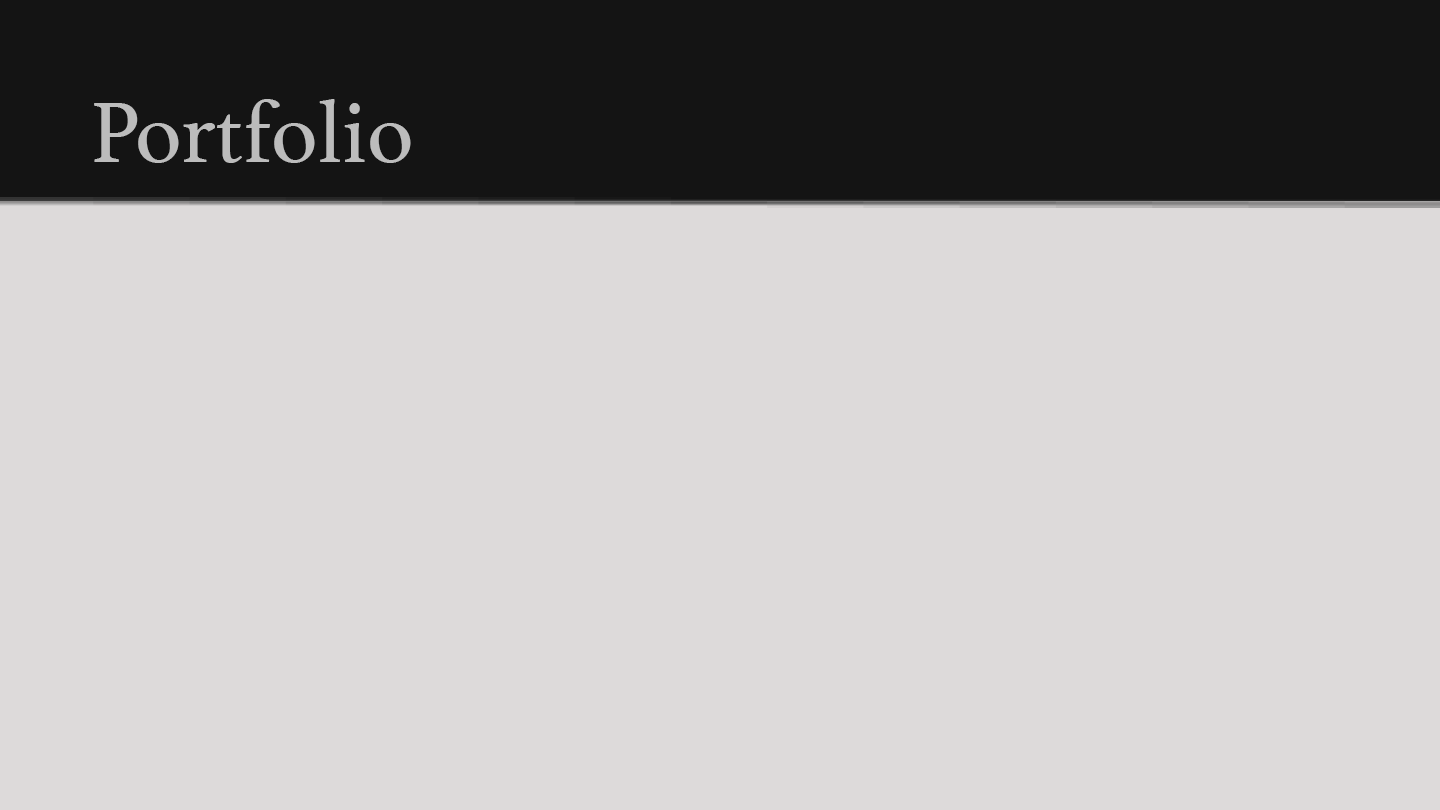
<style>
.page{position:relative;width:1440px;height:810px;background:#dddada}
.page>*{position:absolute;margin:0}
.t1{font:90px "Athelas-Regular";color:#bcbcbc}
</style>
<div class="page">
<p class="t1" style="left:94px;top:99px;width:317px;height:64px">Portfolio</p>
</div>
